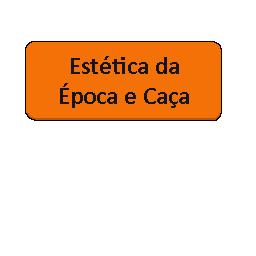
<style>
.page{position:relative;width:256px;height:256px;background:#ffffff}
.page>*{position:absolute;margin:0}
.t1{font:25px "Calibri-Bold";color:#141619}
</style>
<div class="page">
<p class="t1" style="left:60px;top:56px;width:129px;height:52px;text-align:center">Estética da Época e Caça</p>
</div>
